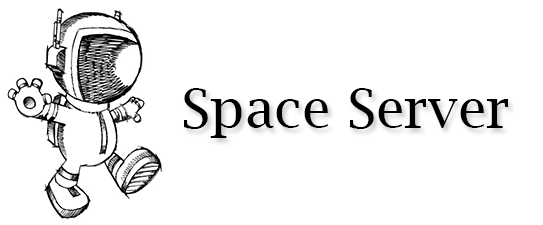
<style>
.page{position:relative;width:543px;height:225px;background:#ffffff}
.page>*{position:absolute;margin:0}
.t1{font:54.1px "LucidaBright";color:#000000}
</style>
<div class="page">
<p class="t1" style="left:184px;top:88px;width:324px;height:50px">Space Server</p>
</div>
